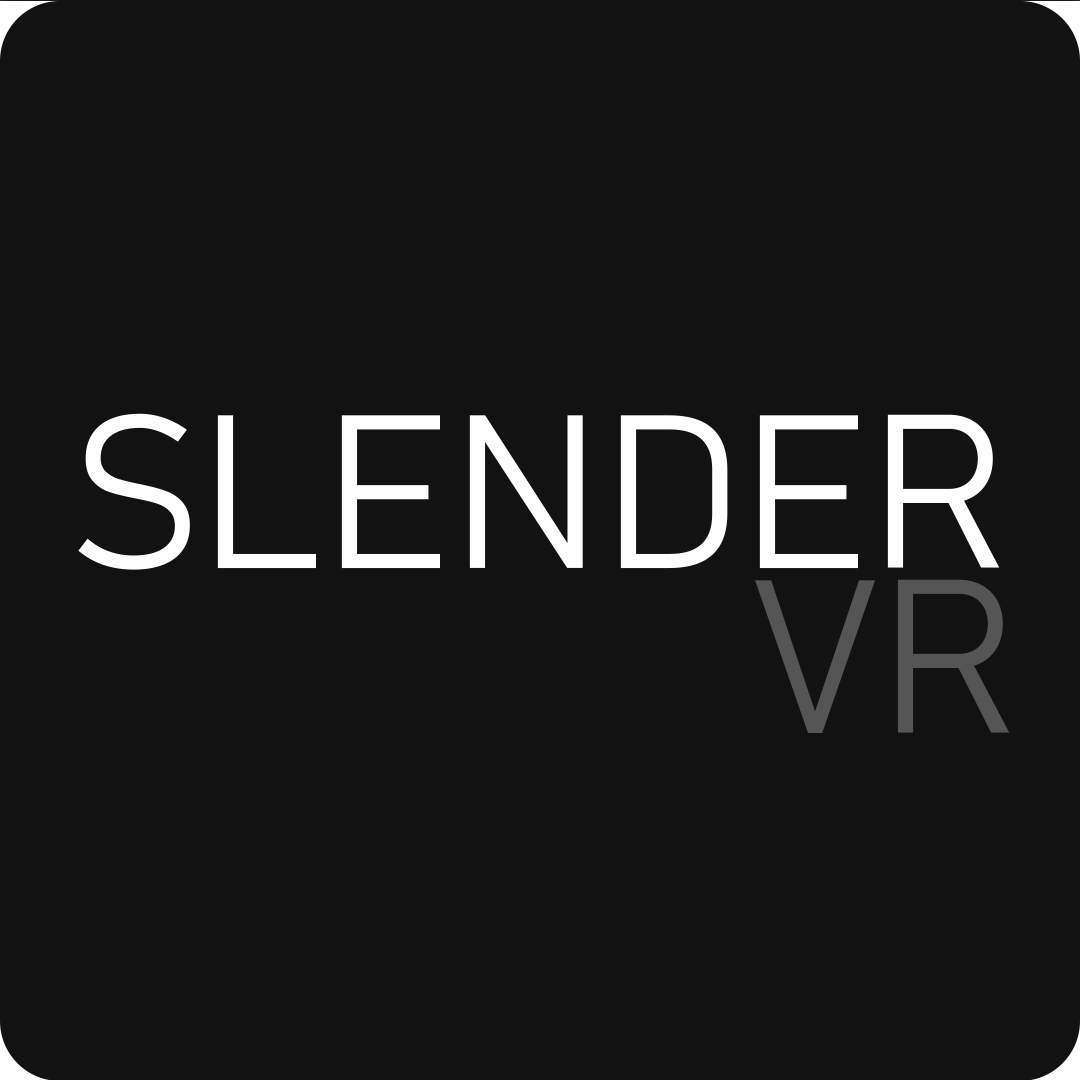
<style>
.page{position:relative;width:1080px;height:1080px;background:#121212}
.page>*{position:absolute;margin:0}
.t1{font:215px "Bahnschrift-Light";color:#fefefe}
.t2{font:215px "Bahnschrift-Light";color:#555555}
</style>
<div class="page">
<p class="t1" style="left:78px;top:412px;width:922px;height:157px">SLENDER</p>
<p class="t2" style="left:755px;top:578px;width:255px;height:154px">VR</p>
</div>
